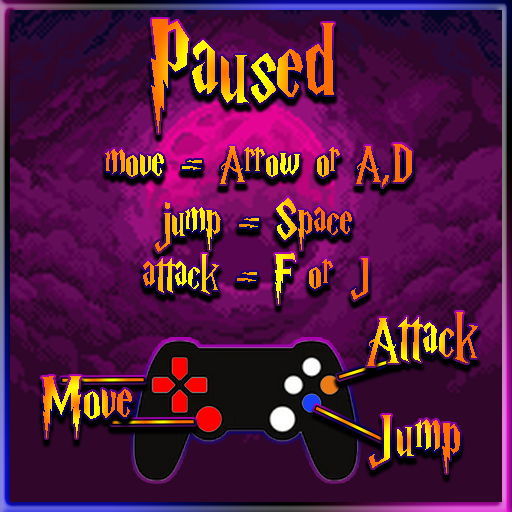
<style>
.page{position:relative;width:512px;height:512px}
.page>*{position:absolute;margin:0}
.t1{font:118.1px "HarryP";scale:0.86 1}
.t2{font:54.6px "HarryP";scale:0.86 1}
.t3{font:69.3px "HarryP";scale:0.86 1}
</style>
<div class="page">
<p class="t1" style="left:151px;top:19px;width:183px;height:114px">Paused</p>
<p class="t2" style="left:105px;top:144px;width:307px;height:43px">move = Arrow or A,D</p>
<p class="t2" style="left:155px;top:198px;width:197px;height:54px">jump = Space</p>
<p class="t2" style="left:143px;top:253px;width:225px;height:51px">attack = F or J</p>
<p class="t3" style="left:367px;top:312px;width:111px;height:54px">Attack</p>
<p class="t3" style="left:42px;top:376px;width:90px;height:62px">Move</p>
<p class="t3" style="left:369px;top:415px;width:91px;height:58px">Jump</p>
</div>
